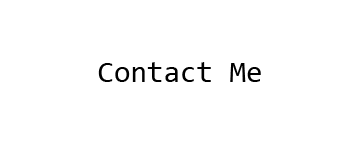
<style>
.page{position:relative;width:360px;height:144px;background:#ffffff}
.page>*{position:absolute;margin:0}
.t1{font:30px "Consolas";color:#000000}
</style>
<div class="page">
<p class="t1" style="left:98px;top:62px;width:163px;height:20px">Contact Me</p>
</div>
